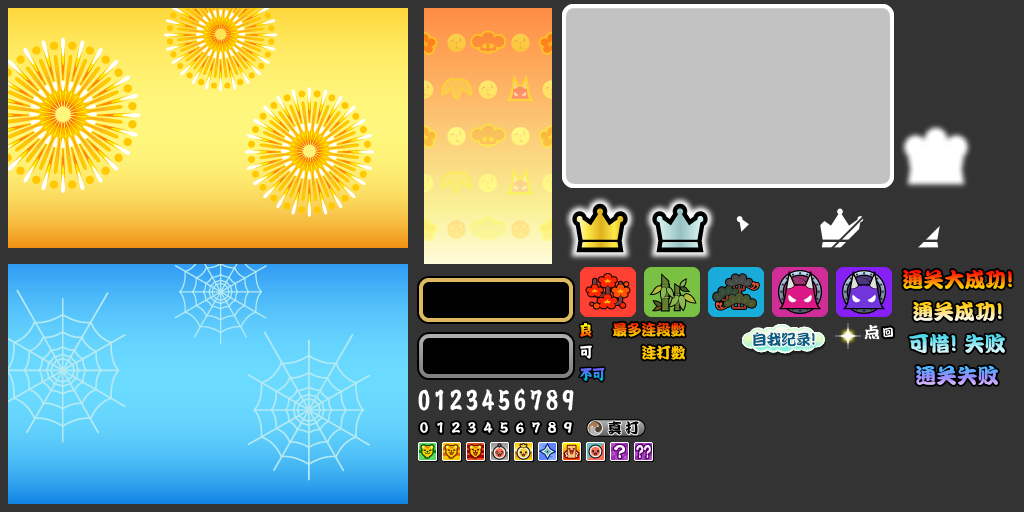
<style>
.page{position:relative;width:1024px;height:512px;background:#333333}
.page>*{position:absolute;margin:0}
.t1{font:21px "DFPKanTingLiuW9";letter-spacing:-0.01em}
.t2{font:23px "DFPKanTingLiuW9";letter-spacing:-0.01em}
.t3{font:15px "DFPKanTingLiuW9";letter-spacing:-0.03em}
.t4{font:15px "DFPKanTingLiuW9";letter-spacing:-0.02em;color:#085d83}
.t5{font:17px "DFPKanTingLiuW9";letter-spacing:-0.02em;color:#085d83}
.t6{font:15px "DFPKanTingLiuW9";letter-spacing:-0.03em;color:#ffc800}
</style>
<div class="page">
<p class="t1" style="left:903px;top:269px;width:109px;height:20px">通关大成功<span class="t2">!</span></p>
<p class="t1" style="left:913px;top:301px;width:89px;height:20px">通关成功<span class="t2">!</span></p>
<p class="t3" style="left:613px;top:322px;width:72px;height:15px">最多连段数</p>
<p class="t4" style="left:753px;top:332px;width:62px;height:15px">自我纪录<span class="t5">!</span></p>
<p class="t1" style="left:909px;top:333px;width:96px;height:20px">可惜<span class="t2">!</span> 失败</p>
<p class="t6" style="left:642px;top:345px;width:43px;height:15px">连打数</p>
<p class="t1" style="left:916px;top:365px;width:82px;height:20px">通关失败</p>
</div>
